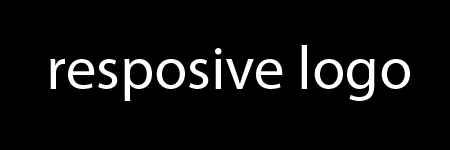
<style>
.page{position:relative;width:450px;height:150px;background:#000000}
.page>*{position:absolute;margin:0}
.t1{font:60.4px "MyriadPro-Regular";color:#ffffff}
</style>
<div class="page">
<p class="t1" style="left:50px;top:45px;width:360px;height:56px">resposive logo</p>
</div>
